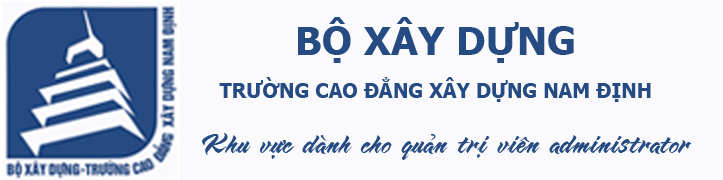
<style>
.page{position:relative;width:723px;height:180px;background:#fafafc}
.page>*{position:absolute;margin:0}
.t1{font:39.4px "Tahoma-Bold";color:#254b82}
.t2{font:20px "Tahoma-Bold";color:#254b82}
.t3{font:22.4px "VNI-Butlong";color:#254b82}
</style>
<div class="page">
<p class="t1" style="left:298px;top:17px;width:276px;height:46px">BỘ XÂY DỰNG</p>
<p class="t2" style="left:219px;top:77px;width:432px;height:25px">TRƯỜNG CAO ĐẲNG XÂY DỰNG NAM ĐỊNH</p>
<p class="t3" style="left:202px;top:133px;width:490px;height:27px">Khu vöïc daønh cho quaûn trò vieân administrator</p>
</div>
